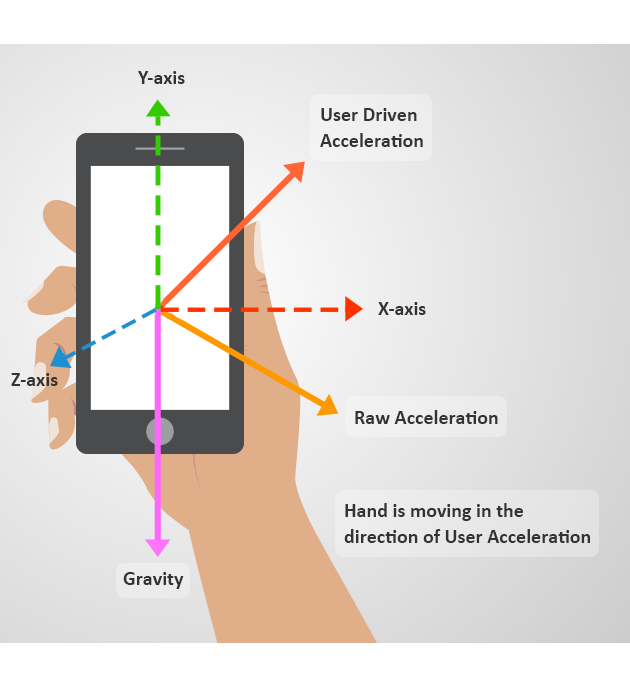
<style>
.page{position:relative;width:630px;height:689px;background:#ffffff}
.page>*{position:absolute;margin:0}
.t1{font:20px "Calibri-Bold";color:#333333}
.t2{font:20px/26.4px "Calibri-Bold";color:#333333}
</style>
<div class="page">
<p class="t1" style="left:138px;top:71px;width:47px;height:13px">Y-axis</p>
<p class="t2" style="left:320px;top:108px;width:103px;height:39px">User Driven <br>Acceleration</p>
<p class="t1" style="left:378px;top:302px;width:48px;height:13px">X-axis</p>
<p class="t1" style="left:11px;top:373px;width:47px;height:13px">Z-axis</p>
<p class="t1" style="left:355px;top:410px;width:143px;height:14px">Raw Acceleration</p>
<p class="t2" style="left:344px;top:503px;width:246px;height:40px">Hand is moving in the <br>direction of User Acceleration</p>
<p class="t1" style="left:123px;top:572px;width:61px;height:17px">Gravity</p>
</div>
